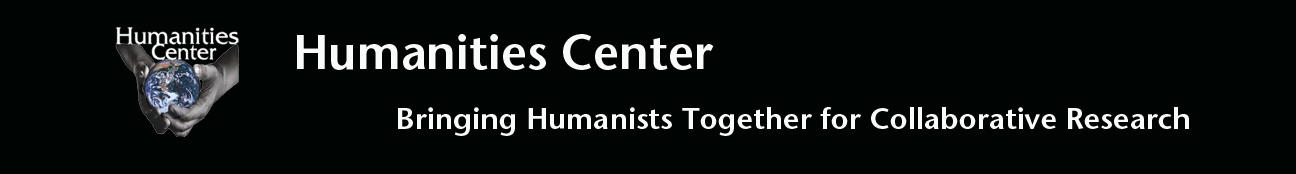
<style>
.page{position:relative;width:1296px;height:174px;background:#000403}
.page>*{position:absolute;margin:0}
.t1{font:48px "StoneSans-Semibold";color:#f9fafa}
.t2{font:30px "StoneSans-Semibold";color:#f9fafa}
</style>
<div class="page">
<p class="t1" style="left:297px;top:34px;width:417px;height:36px">Humanities Center</p>
<p class="t2" style="left:398px;top:107px;width:791px;height:29px">Bringing Humanists Together for Collaborative Research</p>
</div>
